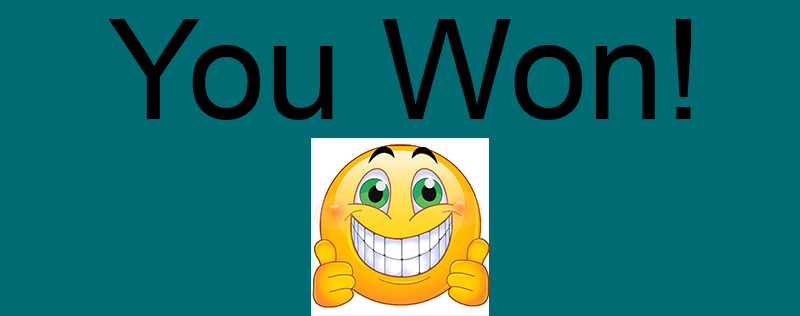
<style>
.page{position:relative;width:800px;height:316px;background:#006b72}
.page>*{position:absolute;margin:0}
.t1{font:139px "ArialMT";color:#000000}
</style>
<div class="page">
<p class="t1" style="left:108px;top:19px;width:584px;height:101px">You Won!</p>
</div>
